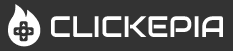
<style>
.page{position:relative;width:233px;height:51px;background:#333333}
.page>*{position:absolute;margin:0}
.t1{font:42px "Audiowide-Regular";color:#ffffff;font-variant:small-caps}
</style>
<div class="page">
<p class="t1" style="left:51px;top:16px;width:172px;height:21px">clickepia</p>
</div>
